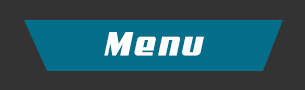
<style>
.page{position:relative;width:305px;height:90px;background:#333333}
.page>*{position:absolute;margin:0}
.t1{font:33.3px "Aero";letter-spacing:0.06em;color:#fffefe;font-weight:bold}
</style>
<div class="page">
<p class="t1" style="left:104px;top:32px;width:100px;height:24px">Menu</p>
</div>
